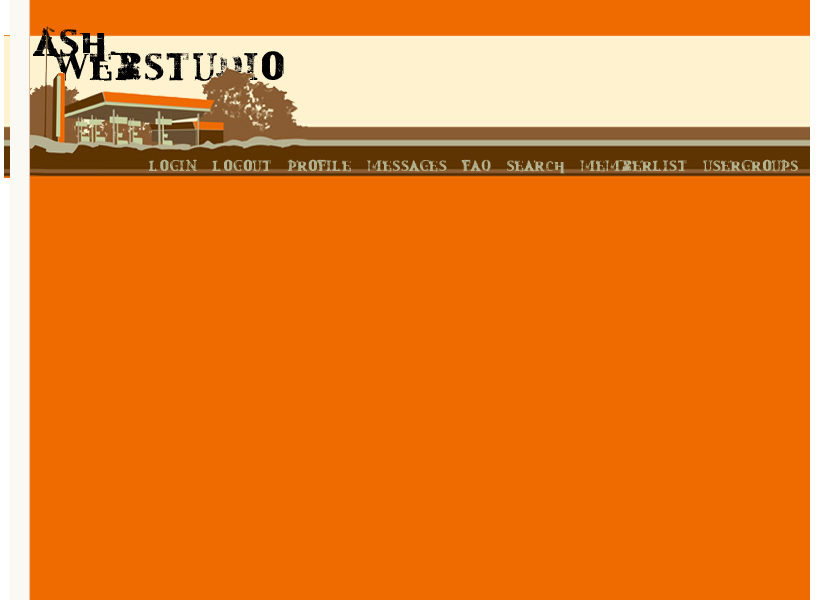
<style>
.page{position:relative;width:840px;height:600px;background:#ef6b00}
.page>*{position:absolute;margin:0}
.t1{font:36px/6px "Mest";letter-spacing:0.05em;color:#000000}
.t2{font:14px "Mest";letter-spacing:0.05em;color:#b3b391}
</style>
<div class="page">
<p class="t1" style="left:33px;top:28px;width:251px;height:53px">Ash<br><br><br> <br> webstudio</p>
<p class="t2" style="left:149px;top:159px;width:649px;height:15px">login  logout  profile  messages  faq  search  memberlist  usergroups</p>
</div>
